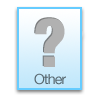
<style>
.page{position:relative;width:100px;height:100px;background:#ffffff}
.page>*{position:absolute;margin:0}
.t1{font:115px "HelveticaNeue-CondensedBlack";letter-spacing:-0.05em;color:#b1b1b1}
.t2{font:24px "HelveticaNeue";letter-spacing:-0.05em;color:#55656d}
</style>
<div class="page">
<p class="t1" style="left:35px;top:18px;width:30px;height:49px">?</p>
<p class="t2" style="left:34px;top:73px;width:32px;height:12px">Other</p>
</div>
